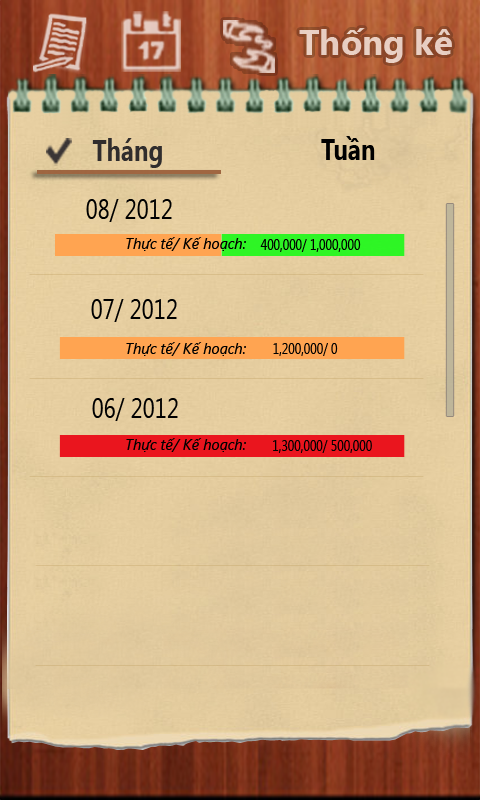
<style>
.page{position:relative;width:480px;height:800px}
.page>*{position:absolute;margin:0}
.t1{font:35px "SegoeUI-Bold";color:#e8cfc3}
.t2{font:30px "SegoeUI-Bold";color:#000000;scale:0.8 1}
.t3{font:30px "SegoeUI-Bold";color:#302d2d;scale:0.8 1}
.t4{font:32.5px "SegoeUI-Bold";color:#302d2d;scale:0.8 1}
.t5{font:28px "SegoeUI";color:#000000;scale:0.8 1}
.t6{font:15px "SegoeUI-Italic";color:#000000}
.t7{font:15px "SegoeUI";color:#000000;scale:0.8 1}
</style>
<div class="page">
<p class="t1" style="left:299px;top:28px;width:153px;height:35px">Thống kê</p>
<p class="t2" style="left:321px;top:136px;width:54px;height:24px">Tuần</p>
<p class="t3" style="left:92px;top:138px;width:70px;height:30px"><span class="t4"> </span>Tháng</p>
<p class="t5" style="left:86px;top:199px;width:86px;height:23px">08/ 2012</p>
<p class="t6" style="left:126px;top:237px;width:120px;height:14px">Thực tế/ Kế hoạch:</p>
<p class="t7" style="left:260px;top:239px;width:101px;height:13px">400,000/ 1,000,000</p>
<p class="t5" style="left:91px;top:299px;width:86px;height:23px">07/ 2012</p>
<p class="t6" style="left:126px;top:342px;width:120px;height:14px">Thực tế/ Kế hoạch:</p>
<p class="t7" style="left:273px;top:343px;width:65px;height:13px">1,200,000/ 0</p>
<p class="t5" style="left:92px;top:398px;width:86px;height:23px">06/ 2012</p>
<p class="t6" style="left:126px;top:438px;width:120px;height:14px">Thực tế/ Kế hoạch:</p>
<p class="t7" style="left:273px;top:440px;width:99px;height:13px">1,300,000/ 500,000</p>
</div>
